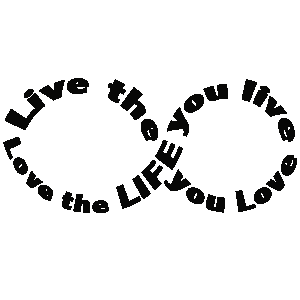
<style>
.page{position:relative;width:300px;height:300px;background:#ffffff}
.page>*{position:absolute;margin:0}
.t1{font:33.3px "AbadiMT-CondensedExtraBold";color:#080807}
.t2{font:29.2px "AbadiMT-CondensedExtraBold";color:#080807}
.t3{font:25.2px "AbadiMT-CondensedExtraBold";color:#080807;scale:0.92 1}
.t4{font:33.6px "AbadiMT-CondensedExtraBold";color:#080807;scale:0.92 1}
.t5{font:29.3px "AbadiMT-CondensedExtraBold";color:#080807;scale:0.92 1}
</style>
<div class="page">
<p class="t1" style="left:5px;top:78px;width:153px;height:63px;rotate:13deg">Live the</p>
<p class="t2" style="left:167px;top:79px;width:128px;height:63px;rotate:4deg">you live</p>
<p class="t3" style="left:3px;top:137px;width:180px;height:76px;rotate:2deg">Love the <span class="t4">LIFE</span></p>
<p class="t5" style="left:164px;top:155px;width:133px;height:58px;rotate:-9deg">you Love</p>
</div>
